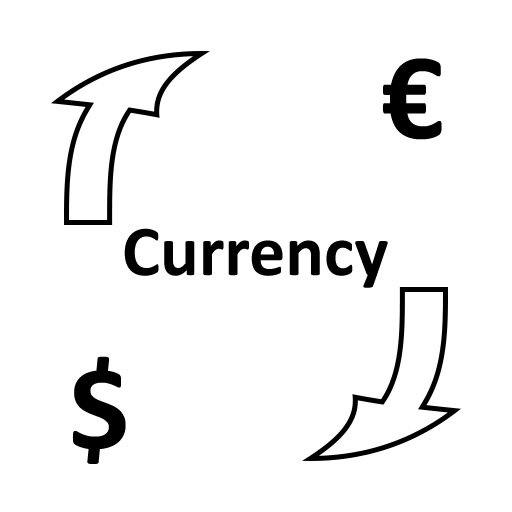
<style>
.page{position:relative;width:512px;height:512px;background:#ffffff}
.page>*{position:absolute;margin:0}
.t1{font:124px "Calibri-Bold";color:#000000}
.t2{font:72px "Calibri-Bold";color:#000000}
</style>
<div class="page">
<p class="t1" style="left:382px;top:58px;width:60px;height:82px">€</p>
<p class="t2" style="left:124px;top:228px;width:264px;height:60px">Currency</p>
<p class="t1" style="left:72px;top:356px;width:54px;height:108px">$</p>
</div>
